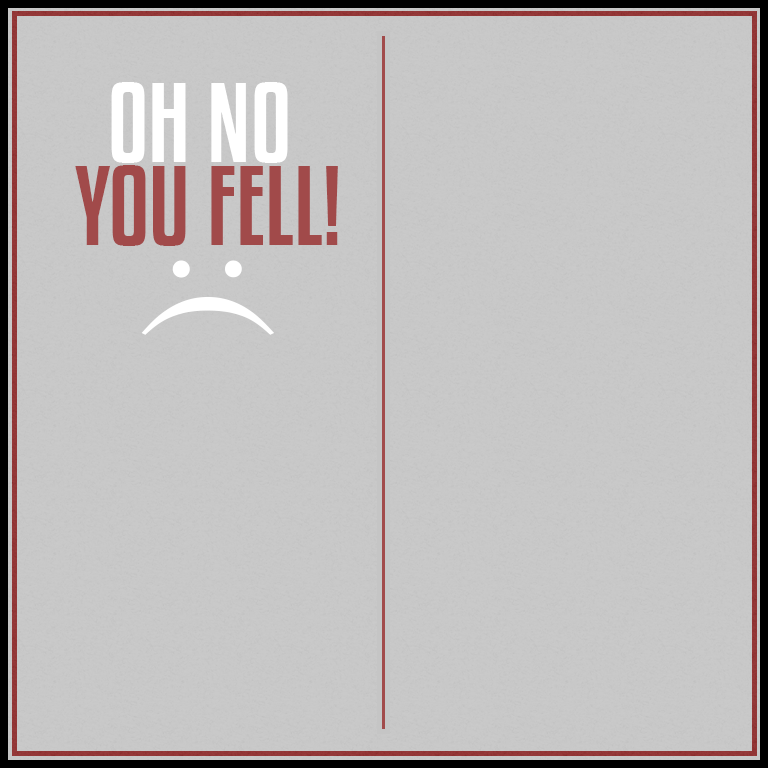
<style>
.page{position:relative;width:768px;height:768px;background:#c8c8c8}
.page>*{position:absolute;margin:0}
.t1{font:100px "KenyanCoffeeRg-Regular";color:#ffffff}
.t2{font:100px "KenyanCoffeeRg-Regular";color:#a14a4a}
.t3{font:141.9px "Century";color:#ffffff}
</style>
<div class="page">
<p class="t1" style="left:111px;top:82px;width:177px;height:81px">OH NO</p>
<p class="t2" style="left:75px;top:165px;width:263px;height:81px">YOU FELL!</p>
<p class="t3" style="left:141px;top:260px;width:133px;height:75px;rotate:90deg">:(</p>
</div>
